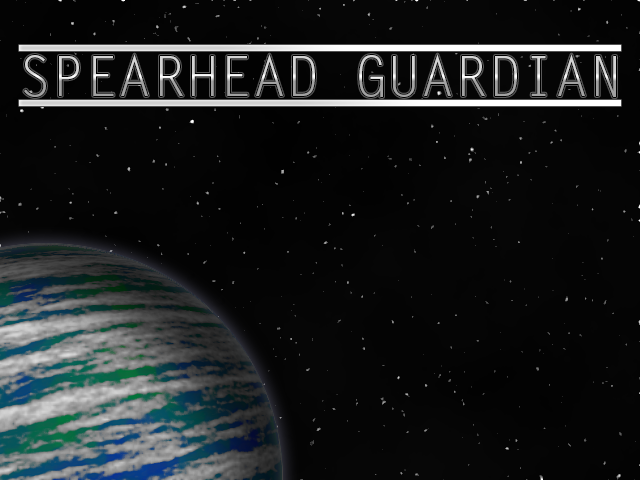
<style>
.page{position:relative;width:640px;height:480px;background:#040404}
.page>*{position:absolute;margin:0}
.t1{font:56px "LetterGothicStd"}
</style>
<div class="page">
<p class="t1" style="left:24px;top:54px;width:592px;height:43px">SPEARHEAD GUARDIAN</p>
</div>
